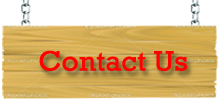
<style>
.page{position:relative;width:220px;height:100px;background:#ffffff}
.page>*{position:absolute;margin:0}
.t1{font:28.7px "Rockwell";color:#ff0100;scale:1.05 1}
</style>
<div class="page">
<p class="t1" style="left:39px;top:50px;width:149px;height:22px">Contact Us</p>
</div>
